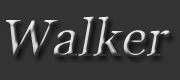
<style>
.page{position:relative;width:180px;height:80px;background:#333333}
.page>*{position:absolute;margin:0}
.t1{font:52px "Georgia";font-style:italic}
</style>
<div class="page">
<p class="t1" style="left:6px;top:16px;width:164px;height:41px">Walker</p>
</div>
